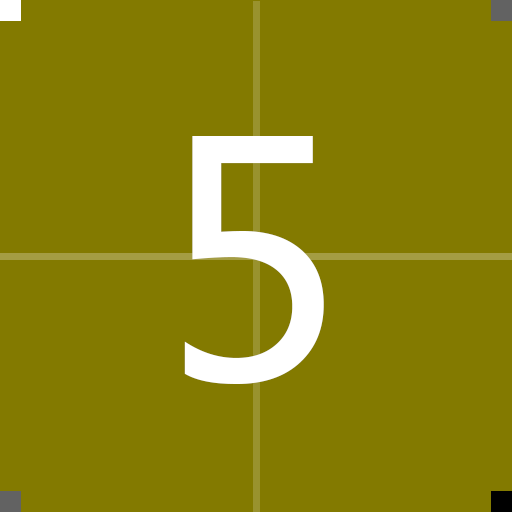
<style>
.page{position:relative;width:512px;height:512px;background:#837a00}
.page>*{position:absolute;margin:0}
.t1{font:323.1px "MicrosoftYaHei";color:#ffffff}
</style>
<div class="page">
<p class="t1" style="left:184px;top:136px;width:140px;height:248px">5</p>
</div>
